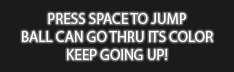
<style>
.page{position:relative;width:234px;height:72px;background:#1b1b1b}
.page>*{position:absolute;margin:0}
.t1{font:15px "MyriadPro-Regular";color:#ffffff}
</style>
<div class="page">
<p class="t1" style="left:22px;top:13px;width:191px;height:47px;text-align:center">PRESS SPACE TO JUMP<br>BALL CAN GO THRU ITS COLOR<br>KEEP GOING UP!</p>
</div>
